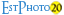
<style>
.page{position:relative;width:64px;height:15px;background:#ffffff}
.page>*{position:absolute;margin:0}
.t1{font:12.3px "TrajanPro-Regular";color:#3388ce}
.t2{font:8.2px "TrajanPro-Regular";color:#3388ce}
.t3{font:16.4px "TrajanPro-Regular";color:#3388ce}
</style>
<div class="page">
<p class="t1" style="left:1px;top:1px;width:8px;height:13px">E</p>
<p class="t2" style="left:8px;top:5px;width:11px;height:6px">st</p>
<p class="t3" style="left:18px;top:1px;width:8px;height:13px">P</p>
<p class="t2" style="left:26px;top:5px;width:24px;height:6px">hoto</p>
</div>
